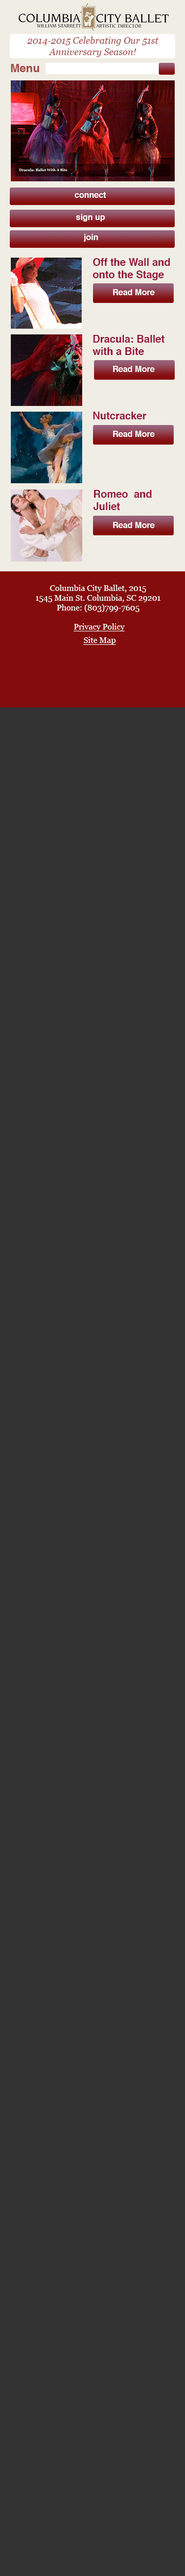
<style>
.page{position:relative;width:185px;height:2576px;background:#333333}
.page>*{position:absolute;margin:0}
.t1{font:9.3px "Georgia-Italic";color:#a24948}
.t2{font:11.3px "Helvetica-Bold";color:#a24948}
.t3{font:8.2px "Helvetica-Bold";color:#ffffff}
.t4{font:10.3px "Helvetica-Bold";color:#94143b}
.t5{font:8.2px "Georgia";color:#ffffff}
.t6{font:8.2px "Georgia";color:#ffffff;text-decoration:underline}
</style>
<div class="page">
<p class="t1" style="left:27px;top:37px;width:132px;height:20px;text-align:center">2014-2015 Celebrating Our 51st Anniversary Season!</p>
<p class="t2" style="left:11px;top:64px;width:28px;height:8px">Menu</p>
<p class="t3" style="left:75px;top:192px;width:31px;height:6px">connect</p>
<p class="t3" style="left:76px;top:214px;width:29px;height:8px">sign up</p>
<p class="t3" style="left:84px;top:234px;width:14px;height:8px">join</p>
<p class="t4" style="left:93px;top:258px;width:78px;height:22px">Off the Wall and onto the Stage</p>
<p class="t3" style="left:113px;top:289px;width:42px;height:6px">Read More</p>
<p class="t4" style="left:93px;top:335px;width:72px;height:20px">Dracula: Ballet with a Bite</p>
<p class="t3" style="left:113px;top:366px;width:42px;height:6px">Read More</p>
<p class="t4" style="left:93px;top:412px;width:54px;height:7px">Nutcracker</p>
<p class="t3" style="left:113px;top:431px;width:42px;height:6px">Read More</p>
<p class="t4" style="left:93px;top:490px;width:59px;height:20px">Romeo  and Juliet</p>
<p class="t3" style="left:113px;top:522px;width:42px;height:6px">Read More</p>
<p class="t5" style="left:36px;top:585px;width:125px;height:27px;text-align:center">Columbia City Ballet, 2015<br>1545 Main St. Columbia, SC 29201<br>Phone: (803)799-7605</p>
<p class="t6" style="left:74px;top:623px;width:51px;height:9px">Privacy Policy</p>
<p class="t6" style="left:83px;top:637px;width:33px;height:8px">Site Map</p>
</div>
